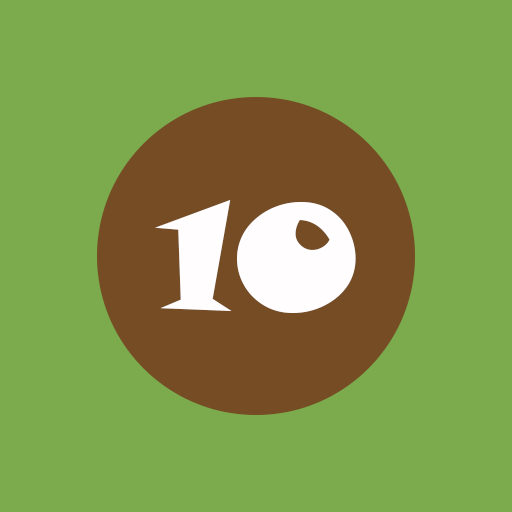
<style>
.page{position:relative;width:512px;height:512px;background:#7cab4e}
.page>*{position:absolute;margin:0}
.t1{font:150px "SnapITC-Regular";color:#fffefe}
</style>
<div class="page">
<p class="t1" style="left:155px;top:200px;width:201px;height:113px">10</p>
</div>
